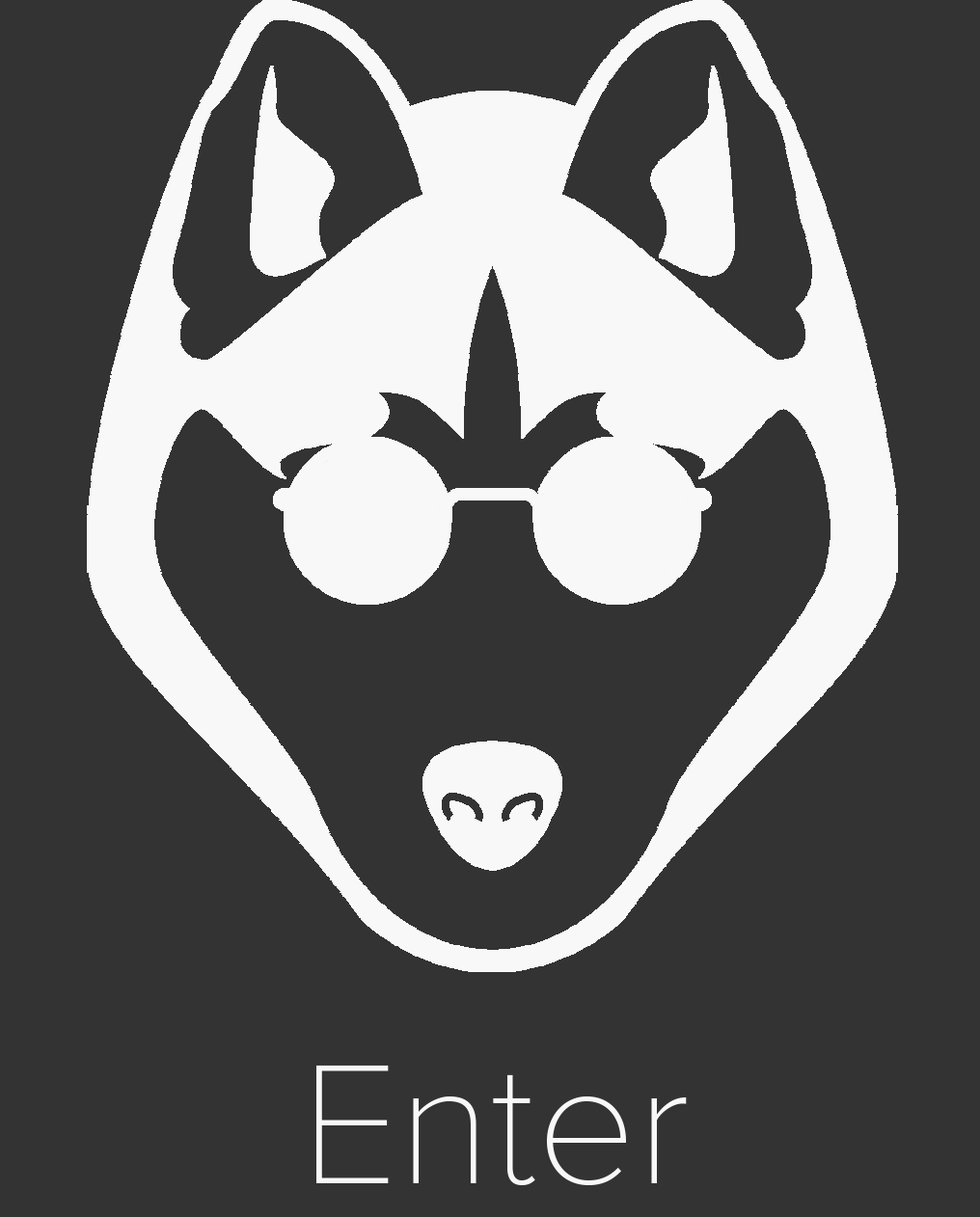
<style>
.page{position:relative;width:980px;height:1217px;background:#333333}
.page>*{position:absolute;margin:0}
.t1{font:175.8px "ProximaNova-Thin";color:#f8f8f8}
</style>
<div class="page">
<p class="t1" style="left:316px;top:1065px;width:371px;height:120px">Enter</p>
</div>
